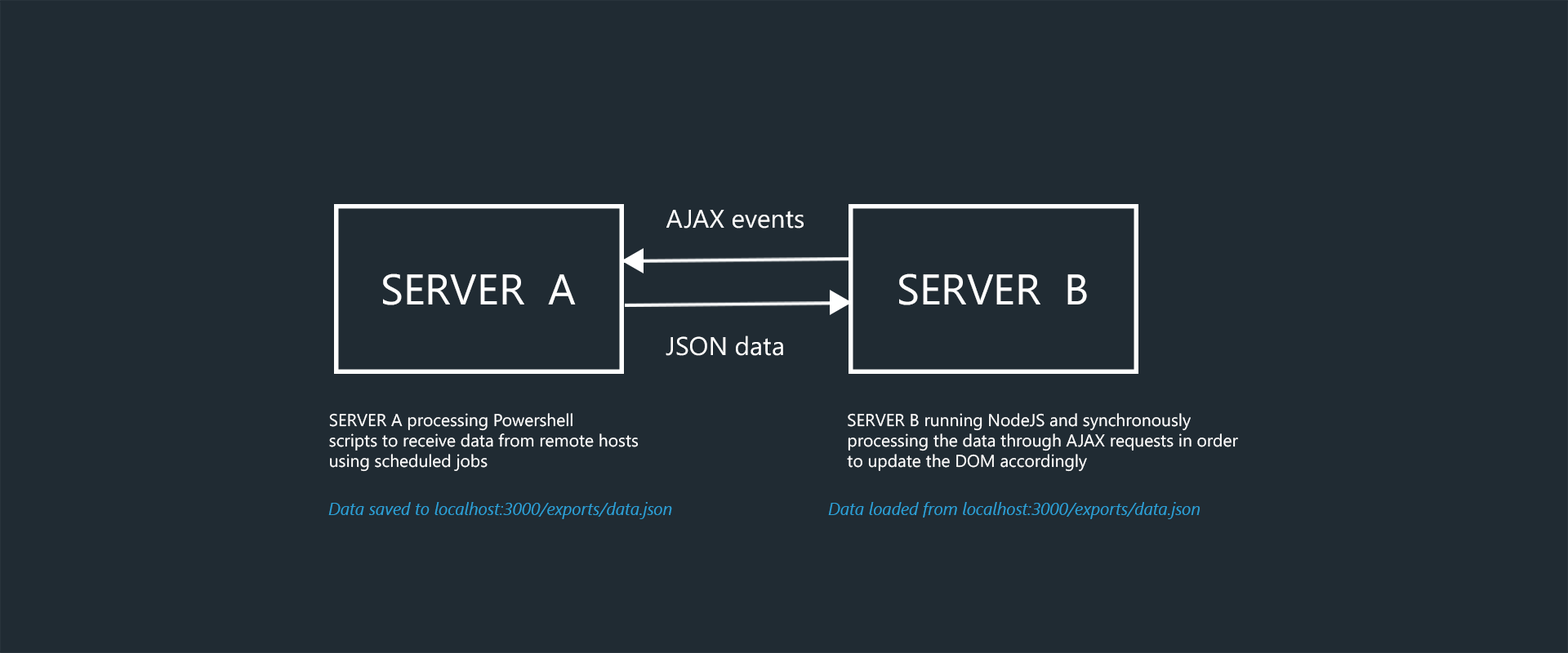
<style>
.page{position:relative;width:1568px;height:653px;background:#202b33}
.page>*{position:absolute;margin:0}
.t1{font:25.7px "SegoeUI";color:#ffffff}
.t2{font:42.8px "SegoeUI";color:#ffffff}
.t3{font:17.1px "SegoeUI";color:#ffffff}
.t4{font:17px "SegoeUI-Italic";color:#2ca0d6}
</style>
<div class="page">
<p class="t1" style="left:666px;top:210px;width:138px;height:19px">AJAX events</p>
<p class="t2" style="left:383px;top:274px;width:193px;height:31px">SERVER  A</p>
<p class="t2" style="left:899px;top:274px;width:188px;height:31px">SERVER  B</p>
<p class="t1" style="left:666px;top:336px;width:117px;height:20px">JSON data</p>
<p class="t3" style="left:329px;top:413px;width:310px;height:59px">SERVER A processing Powershell<br>scripts to receive data from remote hosts <br>using scheduled jobs</p>
<p class="t3" style="left:847px;top:413px;width:391px;height:59px">SERVER B running NodeJS and synchronously <br>processing the data through AJAX requests in order <br>to update the DOM accordingly</p>
<p class="t4" style="left:328px;top:502px;width:344px;height:17px">Data saved to localhost:3000/exports/data.json</p>
<p class="t4" style="left:828px;top:502px;width:372px;height:17px">Data loaded from localhost:3000/exports/data.json</p>
</div>
